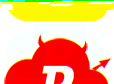
<style>
.page{position:relative;width:114px;height:84px;background:#f9ffff}
.page>*{position:absolute;margin:0}
.t1{font:36px "StarJedi";letter-spacing:0.2em;color:#ff0000;scale:0.96 1}
</style>
<div class="page">
<p class="t1" style="left:42px;top:37px;width:32px;height:25px">D</p>
</div>
